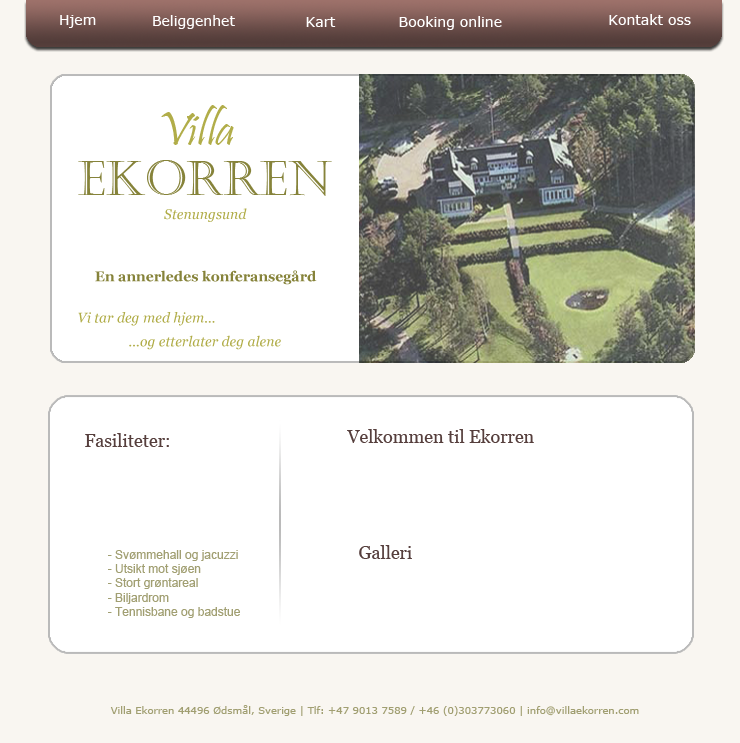
<style>
.page{position:relative;width:740px;height:743px;background:#ffffff}
.page>*{position:absolute;margin:0}
.t1{font:14px "Verdana";color:#ffffff}
.t2{font:48px "Pristina-Regular";color:#b1ad49}
.t3{font:48px "Castellar";color:#86833a}
.t4{font:14px "Georgia-Italic";color:#b1ad49}
.t5{font:14px "Georgia-Bold";color:#86833a}
.t6{font:18px "Georgia";color:#563f3d}
.t7{font:12px "ArialMT";color:#a19f72}
.t8{font:10px "Verdana";color:#a19f72}
</style>
<div class="page">
<p class="t1" style="left:60px;top:15px;width:36px;height:13px">Hjem</p>
<p class="t1" style="left:153px;top:15px;width:82px;height:14px">Beliggenhet</p>
<p class="t1" style="left:306px;top:17px;width:30px;height:10px">Kart</p>
<p class="t1" style="left:399px;top:16px;width:103px;height:14px">Booking online</p>
<p class="t1" style="left:609px;top:14px;width:82px;height:11px">Kontakt oss</p>
<p class="t2" style="left:161px;top:105px;width:73px;height:40px">Villa</p>
<p class="t3" style="left:78px;top:160px;width:254px;height:36px">Ekorren</p>
<p class="t4" style="left:164px;top:208px;width:83px;height:14px">Stenungsund</p>
<p class="t5" style="left:95px;top:270px;width:222px;height:15px">En annerledes konferansegård</p>
<p class="t4" style="left:78px;top:312px;width:137px;height:14px">Vi tar deg med hjem...</p>
<p class="t4" style="left:129px;top:335px;width:152px;height:15px">...og etterlater deg alene</p>
<p class="t6" style="left:85px;top:433px;width:84px;height:14px">Fasiliteter:</p>
<p class="t6" style="left:347px;top:429px;width:187px;height:14px">Velkommen til Ekorren</p>
<p class="t6" style="left:359px;top:545px;width:53px;height:14px">Galleri</p>
<p class="t7" style="left:108px;top:550px;width:132px;height:68px">- Svømmehall og jacuzzi<br>- Utsikt mot sjøen<br>- Stort grøntareal<br>- Biljardrom<br>- Tennisbane og badstue</p>
<p class="t8" style="left:110px;top:705px;width:529px;height:11px">Villa Ekorren 44496 Ødsmål, Sverige | Tlf: +47 9013 7589 / +46 (0)303773060 | info@villaekorren.com</p>
</div>
